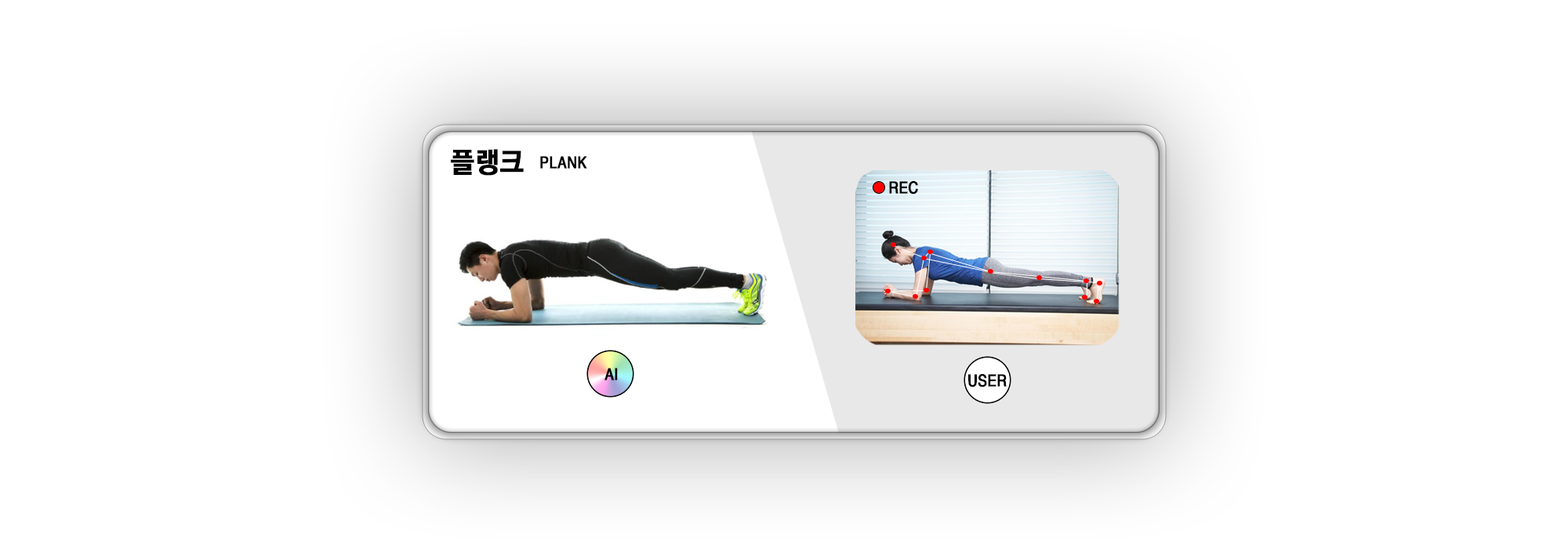
<style>
.page{position:relative;width:1568px;height:549px;background:#ffffff}
.page>*{position:absolute;margin:0}
.t1{font:28.2px "YGO550";color:#000000;font-weight:bold;scale:0.95 1}
.t2{font:15.7px "YGO550";color:#000000;font-weight:bold;scale:0.95 1}
</style>
<div class="page">
<p class="t1" style="left:451px;top:149px;width:73px;height:27px">플랭크</p>
<p class="t2" style="left:540px;top:156px;width:47px;height:13px">PLANK</p>
<p class="t2" style="left:889px;top:180px;width:29px;height:14px">REC</p>
<p class="t2" style="left:604px;top:368px;width:14px;height:12px">AI</p>
<p class="t2" style="left:968px;top:374px;width:39px;height:13px">USER</p>
</div>
